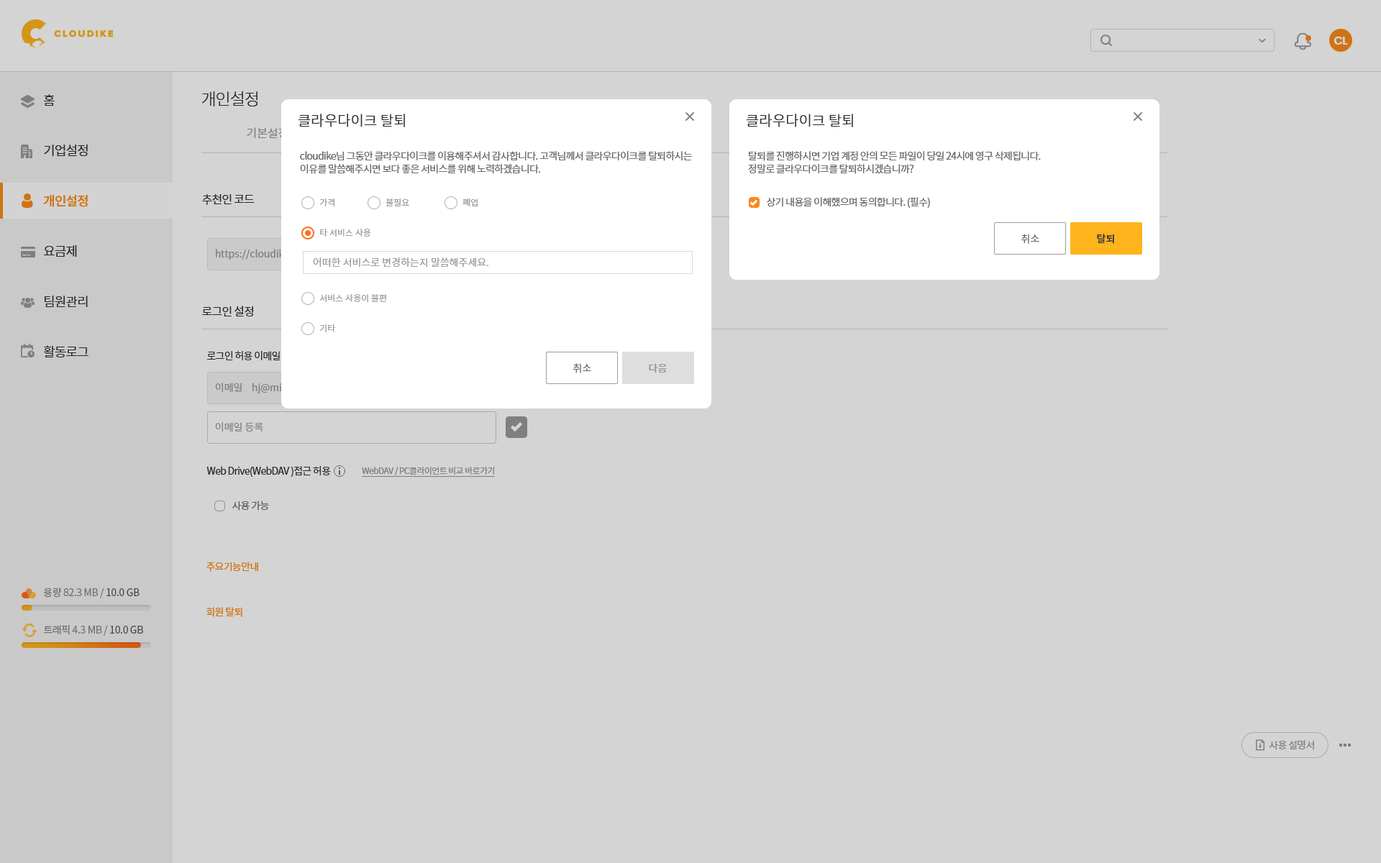
<style>
.page{position:relative;width:1381px;height:863px;background:#d4d4d4}
.page>*{position:absolute;margin:0}
.t1{font:11.5px "Poppins-SemiBold";letter-spacing:-0.05em;color:#d4d4d4}
.t2{font:12.9px/50.4px "NotoSansCJKkr-DemiLight";letter-spacing:-0.05em;color:#333333}
.t3{font:12.9px/50.4px "NotoSansCJKkr-Medium";letter-spacing:-0.05em;color:#f98a17}
.t4{font:16.5px "NotoSansCJKkr-Light";letter-spacing:-0.05em;color:#333333}
.t5{font:14.4px "NotoSansCJKkr-DemiLight";color:#333333}
.t6{font:11.5px "NotoSansCJKkr-DemiLight";color:#7f7f7f}
.t7{font:10.1px/12.9px "NotoSansCJKkr-DemiLight";letter-spacing:-0.05em;color:#666666}
.t8{font:11.5px "NotoSansCJKkr-Regular";letter-spacing:-0.05em;color:#333333}
.t9{font:8.6px "NotoSansCJKkr-DemiLight";color:#999999}
.t10{font:10.1px "NotoSansCJKkr-DemiLight";letter-spacing:-0.05em;color:#666666}
.t11{font:10.1px "NotoSansCJKkr-Regular";color:#666666}
.t12{font:10.1px "NotoSansCJKkr-Medium";color:#333333}
.t13{font:10.1px "NotoSansCJKkr-DemiLight";color:#999999}
.t14{font:10.1px "NotoSansCJKkr-Regular";letter-spacing:-0.05em;color:#333333}
.t15{font:10.1px "NotoSansCJKkr-Medium";color:#999999}
.t16{font:10.1px "NotoSansCJKkr-DemiLight"}
.t17{font:8.6px "NotoSansCJKkr-Regular";letter-spacing:-0.05em;color:#999999}
.t18{font:10.1px "NotoSansCJKkr-Regular";letter-spacing:-0.05em;color:#cf7313}
.t19{font:10.1px "NotoSansCJKkr-Regular";letter-spacing:-0.025em;color:#888888}
.t20{font:10.1px "NotoSansCJKkr-Regular";letter-spacing:-0.025em;color:#585858}
.t21{font:10.1px "NotoSansCJKkr-Regular";letter-spacing:-0.05em;color:#7f7f7f}
</style>
<div class="page">
<p class="t1" style="left:1334px;top:36px;width:14px;height:9px">CL</p>
<p class="t2" style="left:43px;top:94px;width:45px;height:264px">홈<br>기업설정<br><span class="t3">개인설정<br></span>요금제<br>팀원관리<br>활동로그</p>
<p class="t4" style="left:201px;top:91px;width:57px;height:15px">개인설정</p>
<p class="t5" style="left:298px;top:114px;width:107px;height:13px">클라우다이크 탈퇴</p>
<p class="t5" style="left:746px;top:114px;width:107px;height:13px">클라우다이크 탈퇴</p>
<p class="t6" style="left:247px;top:127px;width:41px;height:11px">기본설정</p>
<p class="t7" style="left:300px;top:151px;width:392px;height:23px">cloudike님 그동안 클라우다이크를 이용해주셔서 감사합니다. 고객님께서 클라우다이크를 탈퇴하시는<br>이유를 말씀해주시면 보다 좋은 서비스를 위해 노력하겠습니다.</p>
<p class="t7" style="left:748px;top:151px;width:293px;height:23px">탈퇴를 진행하시면 기업 계정 안의 모든 파일이 당일 24시에 영구 삭제됩니다. <br>정말로 클라우다이크를 탈퇴하시겠습니까?</p>
<p class="t8" style="left:202px;top:194px;width:52px;height:11px">추천인 코드</p>
<p class="t9" style="left:463px;top:198px;width:15px;height:8px">폐업</p>
<p class="t10" style="left:767px;top:197px;width:163px;height:11px">상기 내용을 이해했으며 동의합니다. (필수)</p>
<p class="t9" style="left:320px;top:199px;width:15px;height:7px">가격</p>
<p class="t9" style="left:386px;top:199px;width:23px;height:7px">불필요</p>
<p class="t9" style="left:320px;top:228px;width:51px;height:9px">타 서비스 사용</p>
<p class="t11" style="left:1022px;top:234px;width:18px;height:10px">취소</p>
<p class="t12" style="left:1097px;top:234px;width:17px;height:10px">탈퇴</p>
<p class="t13" style="left:313px;top:258px;width:175px;height:10px">어떠한 서비스로 변경하는지 말씀해주세요.</p>
<p class="t9" style="left:319px;top:294px;width:67px;height:9px">서비스 사용이 불편</p>
<p class="t8" style="left:202px;top:306px;width:51px;height:11px">로그인 설정</p>
<p class="t9" style="left:319px;top:324px;width:17px;height:8px">기타</p>
<p class="t14" style="left:207px;top:351px;width:93px;height:10px">로그인 허용 이메일 추가</p>
<p class="t11" style="left:573px;top:363px;width:18px;height:10px">취소</p>
<p class="t15" style="left:649px;top:363px;width:18px;height:10px">다음</p>
<p class="t15" style="left:649px;top:363px;width:18px;height:10px">다음</p>
<p class="t16" style="left:215px;top:383px;width:102px;height:11px">이메일    hj@mir9.co.kr</p>
<p class="t13" style="left:215px;top:422px;width:48px;height:10px">이메일 등록</p>
<p class="t14" style="left:206px;top:466px;width:125px;height:11px">Web Drive(WebDAV )접근 허용</p>
<p class="t17" style="left:362px;top:467px;width:132px;height:9px">WebDAV / PC클라이언트 비교 바로가기</p>
<p class="t10" style="left:232px;top:501px;width:37px;height:10px">사용 가능</p>
<p class="t18" style="left:206px;top:562px;width:52px;height:10px">주요기능안내</p>
<p class="t19" style="left:43px;top:588px;width:97px;height:11px">용량 82.3 MB / <span class="t20">10.0 GB</span></p>
<p class="t18" style="left:206px;top:607px;width:36px;height:10px">회원 탈퇴</p>
<p class="t19" style="left:44px;top:625px;width:99px;height:11px">트래픽 4.3 MB / <span class="t20">10.0 GB</span></p>
<p class="t21" style="left:1269px;top:740px;width:45px;height:10px">사용 설명서</p>
</div>
